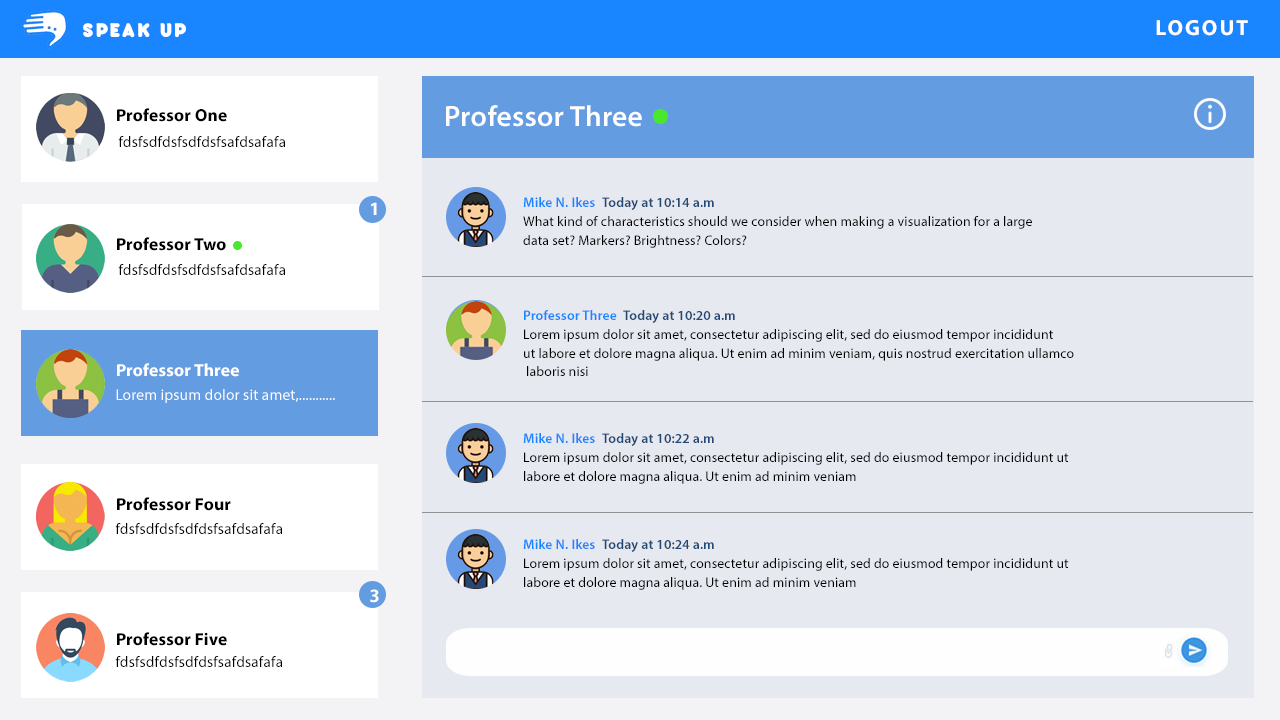
<style>
.page{position:relative;width:1280px;height:720px;background:#e7e9f1}
.page>*{position:absolute;margin:0}
.t1{font:21.8px "Arista20Alternate-Regular";letter-spacing:0.09em;color:#ffffff;text-transform:uppercase}
.t2{font:21.8px "MyriadPro-Bold";letter-spacing:0.09em;color:#ffffff;text-transform:uppercase}
.t3{font:17.5px "MyriadPro-Bold";letter-spacing:0.01em;color:#000000}
.t4{font:29.2px "MyriadPro-Semibold";letter-spacing:0.01em;color:#ffffff}
.t5{font:15.4px "MyriadPro-Regular";letter-spacing:0.01em;color:#000000}
.t6{font:13.8px "MyriadPro-Semibold";letter-spacing:0.01em;color:#1985ff}
.t7{font:13.8px "MyriadPro-Semibold";letter-spacing:0.01em;color:#224974}
.t8{font:18.8px "MyriadPro-Bold";letter-spacing:0.01em;color:#fefefe}
.t9{font:13.8px/18.6px "MyriadPro-Regular";letter-spacing:0.01em;color:#000000}
.t10{font:17.5px "MyriadPro-Bold";letter-spacing:0.01em;color:#ffffff}
.t11{font:15.4px "MyriadPro-Regular";letter-spacing:0.01em;color:#ffffff}
</style>
<div class="page">
<p class="t1" style="left:83px;top:23px;width:103px;height:15px">SPEAK UP</p>
<p class="t2" style="left:1156px;top:20px;width:92px;height:16px">LOGOUT</p>
<p class="t3" style="left:117px;top:108px;width:110px;height:14px">Professor One</p>
<p class="t4" style="left:446px;top:105px;width:196px;height:22px">Professor Three</p>
<p class="t5" style="left:118px;top:136px;width:167px;height:11px">fdsfsdfdsfsdfdsfsafdsafafa</p>
<p class="t6" style="left:523px;top:197px;width:72px;height:10px">Mike N. Ikes</p>
<p class="t7" style="left:602px;top:197px;width:112px;height:13px">Today at 10:14 a.m</p>
<p class="t8" style="left:371px;top:202px;width:6px;height:13px">1</p>
<p class="t9" style="left:523px;top:216px;width:509px;height:32px">What kind of characteristics should we consider when making a visualization for a large<br>data set? Markers? Brightness? Colors?</p>
<p class="t3" style="left:117px;top:237px;width:109px;height:14px">Professor Two</p>
<p class="t5" style="left:118px;top:264px;width:167px;height:11px">fdsfsdfdsfsdfdsfsafdsafafa</p>
<p class="t6" style="left:524px;top:310px;width:93px;height:10px">Professor Three</p>
<p class="t7" style="left:623px;top:310px;width:112px;height:13px">Today at 10:20 a.m</p>
<p class="t9" style="left:524px;top:329px;width:550px;height:47px">Lorem ipsum dolor sit amet, consectetur adipiscing elit, sed do eiusmod tempor incididunt <br>ut labore et dolore magna aliqua. Ut enim ad minim veniam, quis nostrud exercitation ullamco<br> laboris nisi</p>
<p class="t10" style="left:117px;top:363px;width:122px;height:14px">Professor Three</p>
<p class="t11" style="left:116px;top:389px;width:219px;height:14px">Lorem ipsum dolor sit amet,...........</p>
<p class="t6" style="left:523px;top:433px;width:72px;height:10px">Mike N. Ikes</p>
<p class="t7" style="left:602px;top:433px;width:112px;height:13px">Today at 10:22 a.m</p>
<p class="t9" style="left:524px;top:452px;width:545px;height:32px">Lorem ipsum dolor sit amet, consectetur adipiscing elit, sed do eiusmod tempor incididunt ut <br>labore et dolore magna aliqua. Ut enim ad minim veniam</p>
<p class="t3" style="left:117px;top:497px;width:114px;height:14px">Professor Four</p>
<p class="t5" style="left:115px;top:523px;width:167px;height:11px">fdsfsdfdsfsdfdsfsafdsafafa</p>
<p class="t6" style="left:523px;top:539px;width:72px;height:10px">Mike N. Ikes</p>
<p class="t7" style="left:602px;top:539px;width:112px;height:13px">Today at 10:24 a.m</p>
<p class="t9" style="left:524px;top:558px;width:545px;height:32px">Lorem ipsum dolor sit amet, consectetur adipiscing elit, sed do eiusmod tempor incididunt ut <br>labore et dolore magna aliqua. Ut enim ad minim veniam</p>
<p class="t8" style="left:370px;top:589px;width:9px;height:14px">3</p>
<p class="t3" style="left:117px;top:632px;width:110px;height:14px">Professor Five</p>
<p class="t5" style="left:115px;top:656px;width:167px;height:11px">fdsfsdfdsfsdfdsfsafdsafafa</p>
</div>
